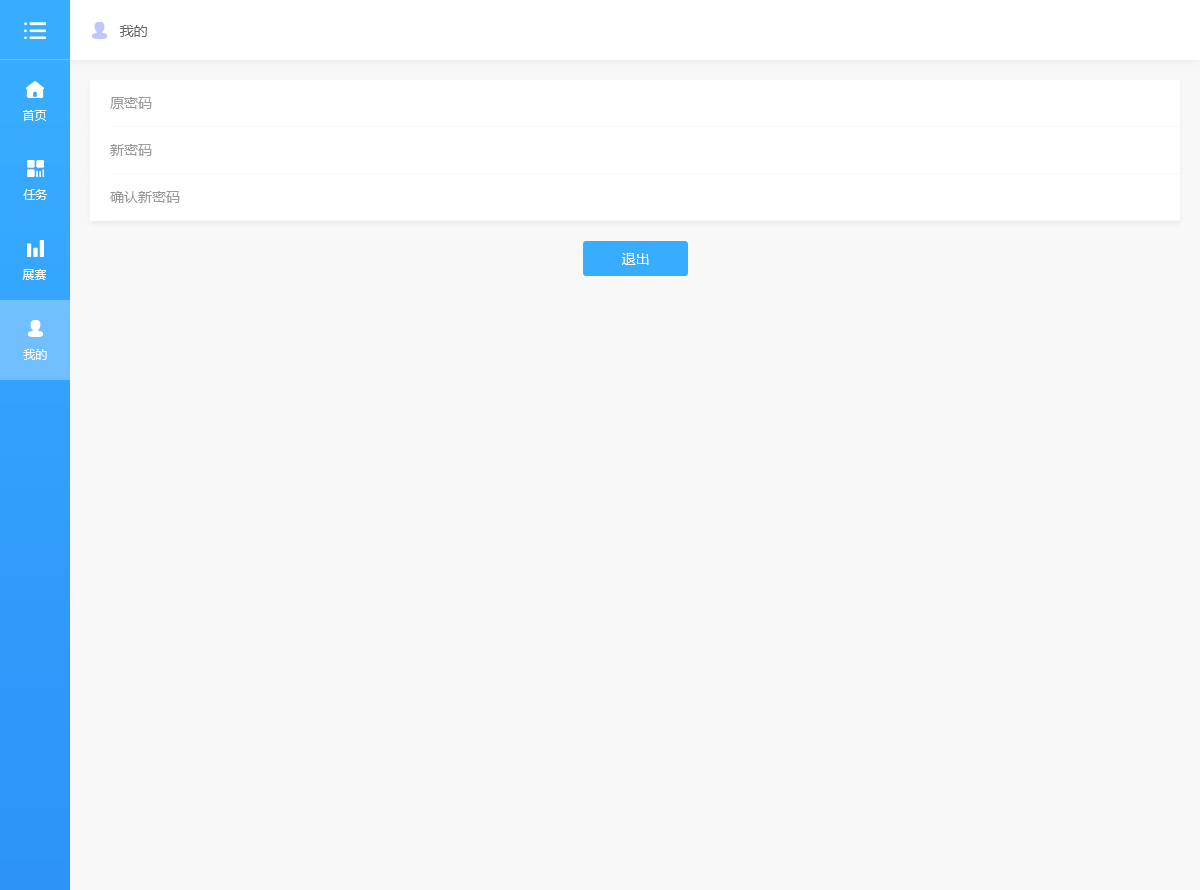
<style>
.page{position:relative;width:1200px;height:890px;background:#f8f8f8}
.page>*{position:absolute;margin:0}
.t1{font:14px "MicrosoftYaHei";color:#666666}
.t2{font:14px "MicrosoftYaHei";color:#999999}
.t3{font:12px "MicrosoftYaHei";color:#ffffff}
.t4{font:14px "MicrosoftYaHei";color:#ffffff}
</style>
<div class="page">
<p class="t1" style="left:119px;top:25px;width:28px;height:12px">我的</p>
<p class="t2" style="left:110px;top:97px;width:42px;height:12px">原密码</p>
<p class="t3" style="left:23px;top:110px;width:24px;height:11px">首页</p>
<p class="t2" style="left:110px;top:144px;width:42px;height:12px">新密码</p>
<p class="t3" style="left:23px;top:189px;width:24px;height:11px">任务</p>
<p class="t2" style="left:110px;top:191px;width:70px;height:12px">确认新密码</p>
<p class="t4" style="left:622px;top:253px;width:27px;height:12px">退出</p>
<p class="t3" style="left:22px;top:269px;width:24px;height:11px">展赛</p>
<p class="t3" style="left:23px;top:349px;width:24px;height:11px">我的</p>
</div>
